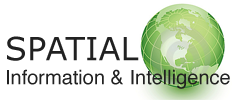
<style>
.page{position:relative;width:235px;height:100px;background:#ffffff}
.page>*{position:absolute;margin:0}
.t1{font:20px "Helvetica";color:#212121}
.t2{font:32px "Verdana";color:#212121}
</style>
<div class="page">
<p class="t1" style="left:7px;top:36px;width:223px;height:53px"><span class="t2">SPATIAL<br></span>Information &amp; Intelligence</p>
</div>
